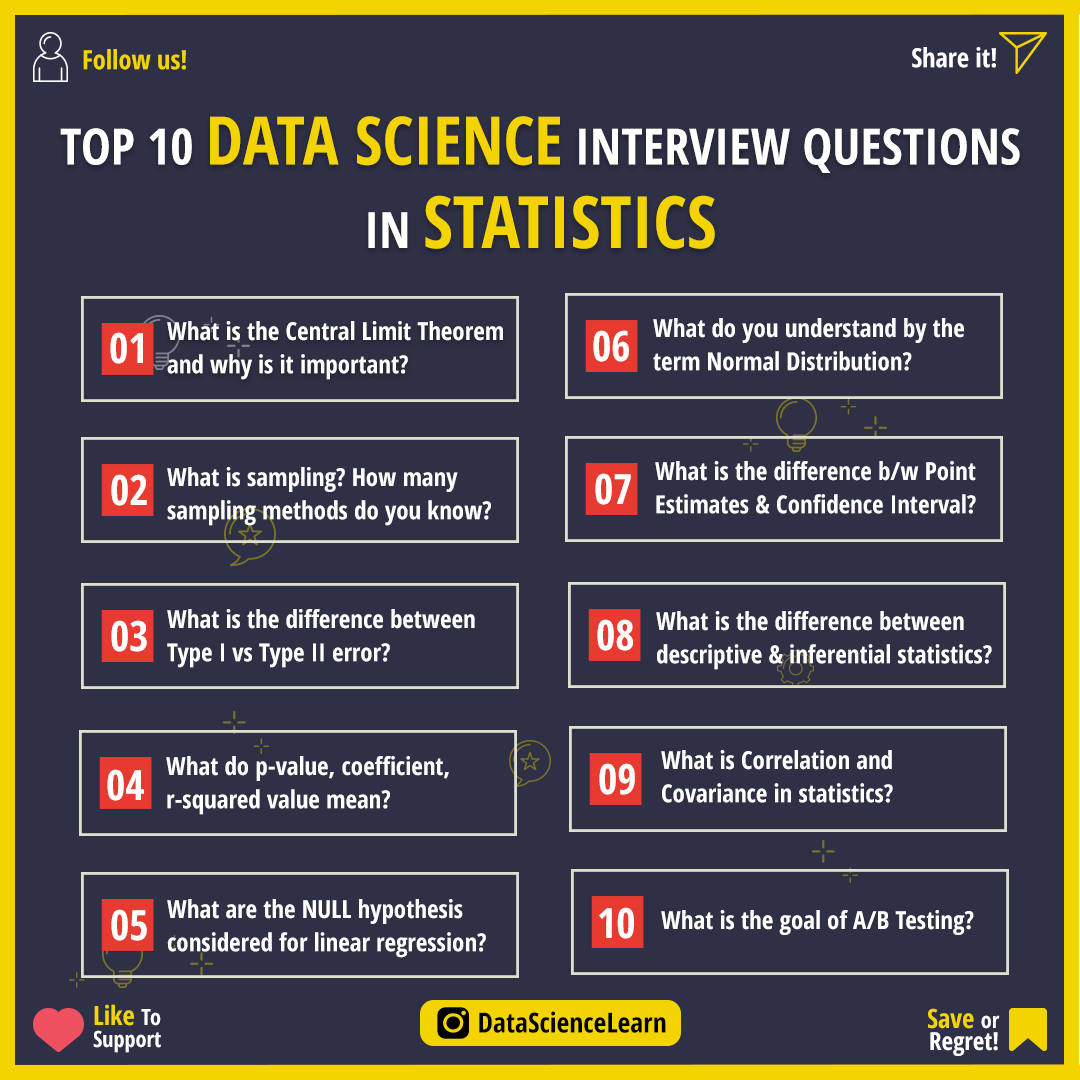
<style>
.page{position:relative;width:1080px;height:1080px;background:#2e3045}
.page>*{position:absolute;margin:0}
.t1{font:26.4px "OpenSans-CondensedBold";color:#f3d400}
.t2{font:26.4px "OpenSans-CondensedBold";color:#ffffff}
.t3{font:50px/72.2px "OpenSans-CondensedBold";color:#fffffe}
.t4{font:66.7px/72.2px "OpenSans-CondensedBold";color:#f3d400}
.t5{font:50px/83.3px "OpenSans-CondensedBold";color:#fffffe}
.t6{font:72.2px/83.3px "OpenSans-CondensedBold";color:#f3d400}
.t7{font:25px/33.3px "OpenSans-CondensedBold";color:#fffffe}
.t8{font:41.7px "OpenSans-CondensedBold";color:#fffffe}
.t9{font:25px "OpenSans-CondensedBold";color:#fffffe}
.t10{font:22.2px/22.2px "OpenSans-CondensedBold";color:#ffffff}
.t11{font:26.4px/22.2px "OpenSans-CondensedBold";color:#f3d400}
.t12{font:27.8px "OpenSans-CondensedBold";color:#000000}
.t13{font:25px/22.2px "OpenSans-CondensedBold";color:#ffffff}
</style>
<div class="page">
<p class="t1" style="left:83px;top:49px;width:103px;height:21px">Follow us!</p>
<p class="t2" style="left:912px;top:47px;width:84px;height:21px">Share it!</p>
<p class="t3" style="left:60px;top:116px;width:960px;height:133px;text-align:center">TOP 10 <span class="t4">DATA SCIENCE</span> INTERVIEW QUESTIONS<br><span class="t5">IN </span><span class="t6">STATISTICS</span></p>
<p class="t7" style="left:653px;top:318px;width:311px;height:53px">What do you understand by the <br>term Normal Distribution?</p>
<p class="t7" style="left:167px;top:321px;width:336px;height:59px">What is the Central Limit Theorem <br>and why is it important?</p>
<p class="t8" style="left:110px;top:332px;width:33px;height:32px">01</p>
<p class="t8" style="left:593px;top:330px;width:36px;height:32px">06</p>
<p class="t7" style="left:655px;top:461px;width:321px;height:53px">What is the difference b/w Point <br>Estimates &amp; Confidence Interval?</p>
<p class="t7" style="left:167px;top:467px;width:324px;height:59px">What is sampling? How many <br>sampling methods do you know?</p>
<p class="t8" style="left:595px;top:473px;width:36px;height:32px">07</p>
<p class="t8" style="left:111px;top:474px;width:36px;height:32px">02</p>
<p class="t7" style="left:167px;top:609px;width:308px;height:59px">What is the difference between <br>Type I vs Type II error?</p>
<p class="t7" style="left:656px;top:611px;width:336px;height:59px">What is the difference between<br>descriptive &amp; inferential statistics?</p>
<p class="t8" style="left:111px;top:620px;width:36px;height:32px">03</p>
<p class="t8" style="left:597px;top:619px;width:36px;height:32px">08</p>
<p class="t7" style="left:661px;top:750px;width:232px;height:53px">What is Correlation and <br>Covariance in statistics?</p>
<p class="t7" style="left:166px;top:756px;width:283px;height:59px">What do p-value, coefficient, <br>r-squared value mean?</p>
<p class="t8" style="left:107px;top:769px;width:37px;height:32px">04</p>
<p class="t8" style="left:599px;top:763px;width:36px;height:32px">09</p>
<p class="t7" style="left:167px;top:899px;width:319px;height:59px">What are the NULL hypothesis<br>considered for linear regression?</p>
<p class="t8" style="left:111px;top:909px;width:36px;height:32px">05</p>
<p class="t8" style="left:599px;top:907px;width:35px;height:32px">10</p>
<p class="t9" style="left:661px;top:910px;width:313px;height:25px">What is the goal of A/B Testing?</p>
<p class="t10" style="left:93px;top:1004px;width:68px;height:49px"><span class="t11">Like </span>To<br>Support</p>
<p class="t12" style="left:479px;top:1011px;width:187px;height:22px">DataScienceLearn</p>
<p class="t13" style="left:928px;top:1008px;width:72px;height:48px;text-align:right"><span class="t11">Save </span><span class="t10">or<br></span>Regret!</p>
</div>
